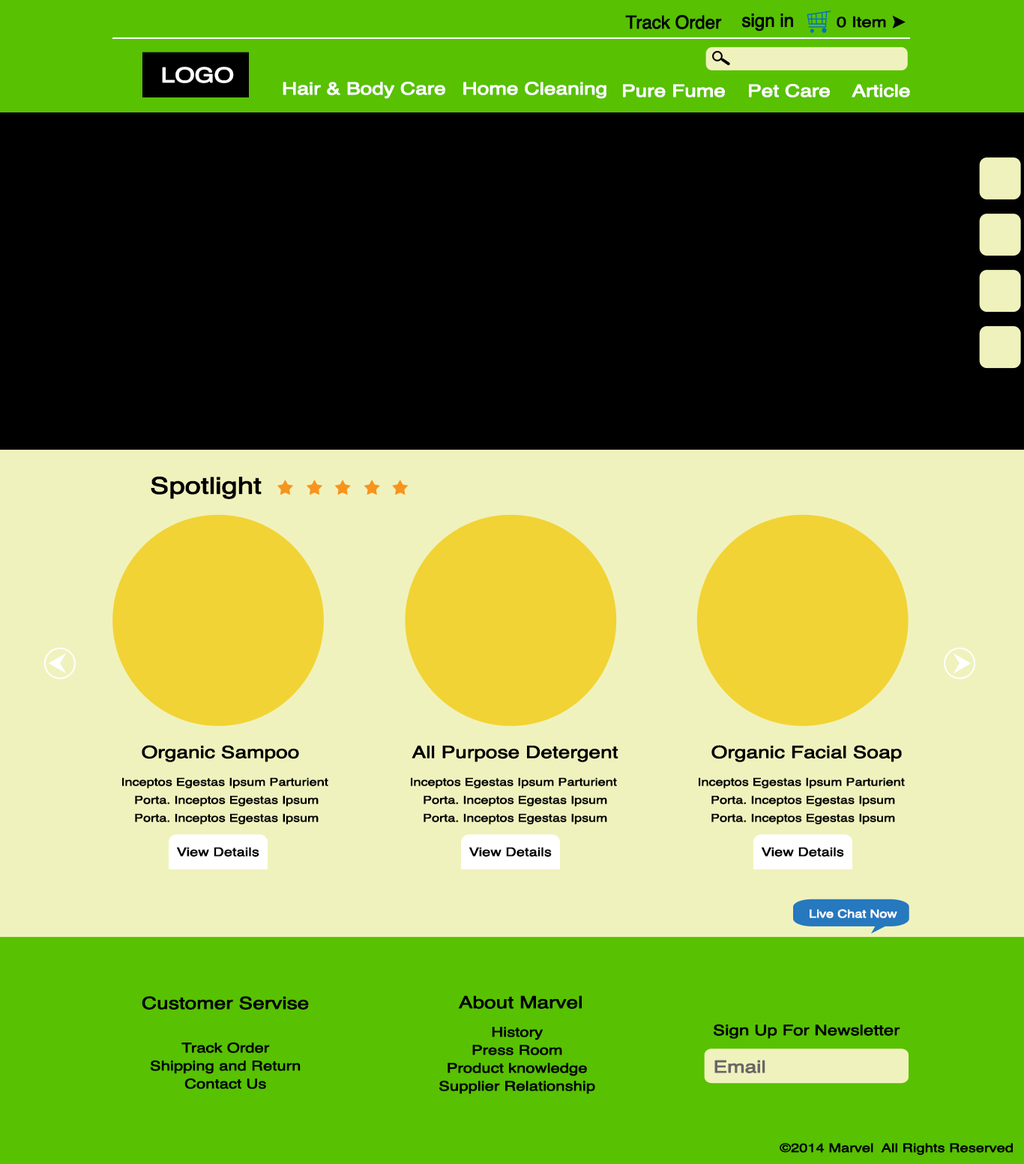
<style>
.page{position:relative;width:1024px;height:1164px;background:#f0f2bd}
.page>*{position:absolute;margin:0}
.t1{font:18px "Helvetica";letter-spacing:-0.025em;color:#000000;font-weight:bold}
.t2{font:14.4px "Helvetica";letter-spacing:-0.025em;color:#000000;font-weight:bold;scale:1.25 1}
.t3{font:20.2px "Helvetica";letter-spacing:-0.025em;color:#ffffff;font-weight:bold;scale:1.25 1}
.t4{font:16.8px "Helvetica";letter-spacing:-0.025em;color:#ffffff;font-weight:bold;scale:1.25 1}
.t5{font:22.8px "Helvetica";letter-spacing:-0.025em;color:#000000;font-weight:bold;scale:1.25 1}
.t6{font:16.8px "Helvetica";letter-spacing:-0.025em;color:#000000;font-weight:bold;scale:1.25 1}
.t7{font:10.8px/18px "Helvetica";letter-spacing:-0.025em;color:#000000;font-weight:bold;scale:1.25 1}
.t8{font:12px "Helvetica";letter-spacing:-0.025em;color:#000000;font-weight:bold;scale:1.25 1}
.t9{font:10.8px "Helvetica";letter-spacing:-0.025em;color:#ffffff;font-weight:bold;scale:1.25 1}
.t10{font:13.2px/18px "Helvetica";letter-spacing:-0.025em;color:#000000;font-weight:bold;scale:1.25 1}
.t11{font:16.8px "Helvetica";letter-spacing:-0.025em;color:#686666;font-weight:bold;scale:1.25 1}
</style>
<div class="page">
<p class="t1" style="left:625px;top:15px;width:97px;height:14px">Track Order</p>
<p class="t1" style="left:741px;top:13px;width:52px;height:18px">sign in</p>
<p class="t2" style="left:837px;top:16px;width:49px;height:12px">0 Item</p>
<p class="t3" style="left:162px;top:67px;width:72px;height:16px">LOGO</p>
<p class="t4" style="left:283px;top:82px;width:162px;height:17px">Hair &amp; Body Care</p>
<p class="t4" style="left:463px;top:82px;width:144px;height:17px">Home Cleaning</p>
<p class="t4" style="left:623px;top:84px;width:102px;height:13px">Pure Fume</p>
<p class="t4" style="left:749px;top:84px;width:81px;height:13px">Pet Care</p>
<p class="t4" style="left:852px;top:84px;width:58px;height:13px">Article</p>
<p class="t5" style="left:151px;top:476px;width:111px;height:23px">Spotlight</p>
<p class="t6" style="left:142px;top:745px;width:157px;height:17px">Organic Sampoo</p>
<p class="t6" style="left:412px;top:745px;width:207px;height:17px">All Purpose Detergent</p>
<p class="t6" style="left:711px;top:745px;width:191px;height:17px">Organic Facial Soap</p>
<p class="t7" style="left:122px;top:777px;width:206px;height:48px;text-align:center">Inceptos Egestas Ipsum Parturient <br>Porta. Inceptos Egestas Ipsum<br>Porta. Inceptos Egestas Ipsum</p>
<p class="t7" style="left:411px;top:777px;width:206px;height:48px;text-align:center">Inceptos Egestas Ipsum Parturient <br>Porta. Inceptos Egestas Ipsum<br>Porta. Inceptos Egestas Ipsum</p>
<p class="t7" style="left:699px;top:777px;width:206px;height:48px;text-align:center">Inceptos Egestas Ipsum Parturient <br>Porta. Inceptos Egestas Ipsum<br>Porta. Inceptos Egestas Ipsum</p>
<p class="t8" style="left:176px;top:847px;width:83px;height:10px">View Details</p>
<p class="t8" style="left:469px;top:847px;width:83px;height:10px">View Details</p>
<p class="t8" style="left:761px;top:847px;width:83px;height:10px">View Details</p>
<p class="t9" style="left:810px;top:909px;width:87px;height:9px">Live Chat Now</p>
<p class="t6" style="left:142px;top:996px;width:167px;height:14px">Customer Servise</p>
<p class="t6" style="left:458px;top:996px;width:124px;height:13px">About Marvel</p>
<p class="t2" style="left:714px;top:1024px;width:186px;height:15px">Sign Up For Newsletter</p>
<p class="t10" style="left:439px;top:1027px;width:156px;height:68px;text-align:center">History<br>Press Room<br>Product knowledge<br>Supplier Relationship</p>
<p class="t10" style="left:150px;top:1042px;width:151px;height:47px;text-align:center">Track Order<br>Shipping and Return<br>Contact Us</p>
<p class="t11" style="left:714px;top:1060px;width:51px;height:14px">Email</p>
<p class="t8" style="left:780px;top:1143px;width:233px;height:12px">©2014 Marvel  All Rights Reserved</p>
</div>
